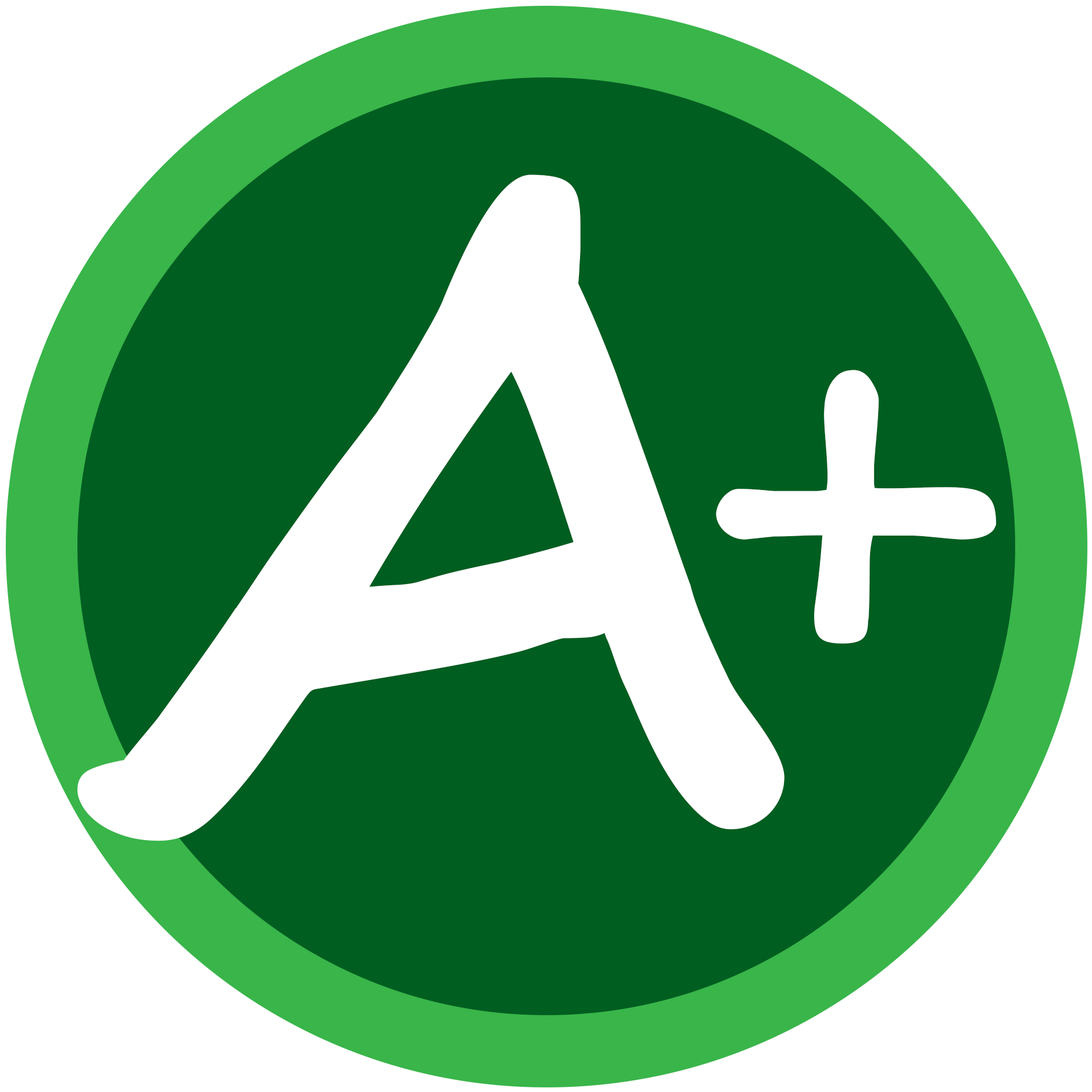
<style>
.page{position:relative;width:1092px;height:1092px;background:#005e20}
.page>*{position:absolute;margin:0}
.t1{font:873.8px "SegoeScript-Bold";color:#ffffff}
.t2{font:559px "SegoeScript-Bold";color:#ffffff}
</style>
<div class="page">
<p class="t1" style="left:77px;top:174px;width:708px;height:667px">A</p>
<p class="t2" style="left:716px;top:370px;width:280px;height:274px">+</p>
</div>
